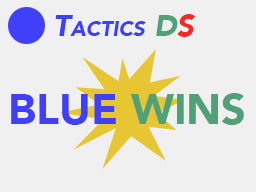
<style>
.page{position:relative;width:256px;height:192px;background:#f0f0f0}
.page>*{position:absolute;margin:0}
.t1{font:30px "Avenir-BlackOblique";color:#4040f8;font-variant:small-caps}
.t2{font:30px "Avenir-BlackOblique";color:#50a078;font-variant:small-caps}
.t3{font:30px "Avenir-BlackOblique";color:#f82828;font-variant:small-caps}
.t4{font:43px "Avenir-Black";color:#4040f8;font-variant:small-caps}
.t5{font:43px "Avenir-Black";color:#50a078;font-variant:small-caps}
</style>
<div class="page">
<p class="t1" style="left:55px;top:14px;width:141px;height:23px">Tactics <span class="t2">D</span><span class="t3">S</span></p>
<p class="t4" style="left:11px;top:93px;width:233px;height:32px">BLUE <span class="t5">WINS</span></p>
</div>
